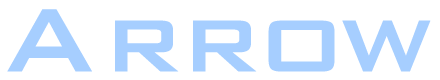
<style>
.page{position:relative;width:440px;height:80px;background:#ffffff}
.page>*{position:absolute;margin:0}
.t1{font:120px "BankGothicRUSSMedium";color:#a6ceff}
</style>
<div class="page">
<p class="t1" style="left:7px;top:9px;width:424px;height:63px">Arrow</p>
</div>
